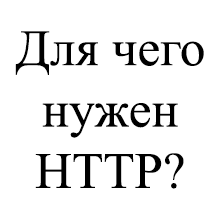
<style>
.page{position:relative;width:221px;height:221px;background:#ffffff}
.page>*{position:absolute;margin:0}
.t1{font:51.1px "TimesNewRomanPSMT";color:#000000}
</style>
<div class="page">
<p class="t1" style="left:15px;top:31px;width:189px;height:158px;text-align:center">Для чего<br>нужен<br>HTTP?</p>
</div>
